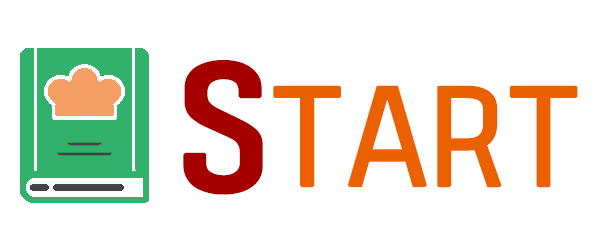
<style>
.page{position:relative;width:600px;height:250px;background:#ffffff}
.page>*{position:absolute;margin:0}
.t1{font:108.1px "KoreanYNSJG3-R";color:#eb6100;font-weight:bold}
.t2{font:138.1px "KoreanYNSJG4-R";color:#a40000;font-weight:bold}
</style>
<div class="page">
<p class="t1" style="left:183px;top:60px;width:395px;height:135px"><span class="t2">S</span>TART</p>
</div>
